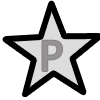
<style>
.page{position:relative;width:100px;height:100px;background:#ffffff}
.page>*{position:absolute;margin:0}
.t1{font:40px "Thonburi-Bold";color:#969292}
</style>
<div class="page">
<p class="t1" style="left:42px;top:40px;width:20px;height:31px">P</p>
</div>
